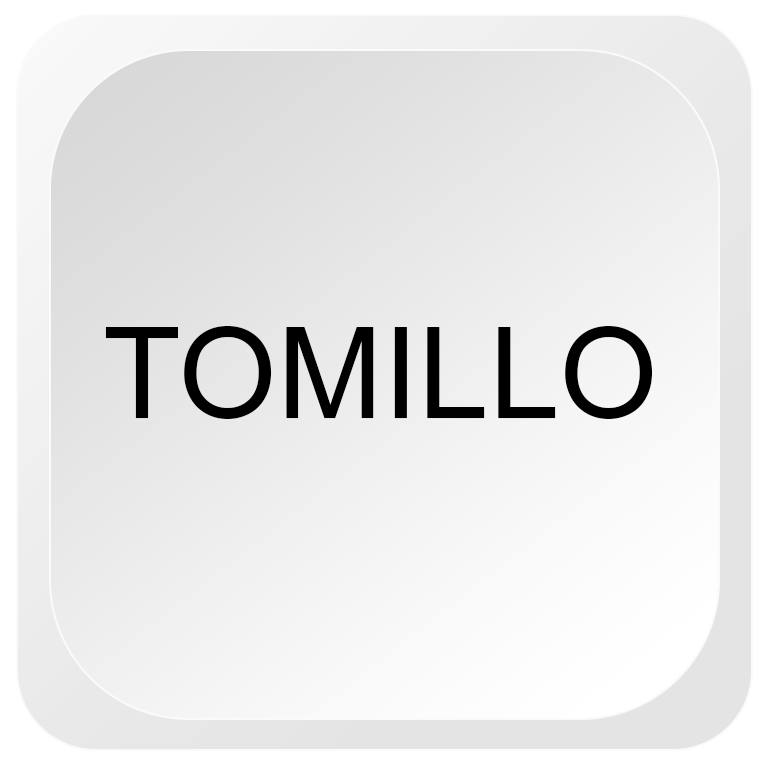
<style>
.page{position:relative;width:768px;height:768px}
.page>*{position:absolute;margin:0}
.t1{font:127px "ArialMT";color:#000000}
</style>
<div class="page">
<p class="t1" style="left:105px;top:326px;width:548px;height:93px">TOMILLO</p>
</div>
